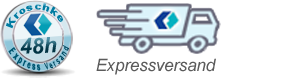
<style>
.page{position:relative;width:300px;height:80px;background:#ffffff}
.page>*{position:absolute;margin:0}
.t1{font:9px "Arial-BoldMT";letter-spacing:0.067em;color:#007ba1;scale:0.94 1}
.t2{font:21.8px "Arial-BoldItalicMT";letter-spacing:-0.013em}
.t3{font:5px "Arial-BoldMT";letter-spacing:0.347em;color:#005570;scale:0.88 1}
.t4{font:4.8px "Arial-BoldMT";letter-spacing:0.355em;color:#00475e;scale:0.88 1}
.t5{font:17.1px "Arial-ItalicMT";letter-spacing:-0.013em;color:#5b5b5b}
</style>
<div class="page">
<p class="t1" style="left:6px;top:3px;width:57px;height:26px;rotate:-7deg">Kroschke</p>
<p class="t2" style="left:20px;top:37px;width:37px;height:17px;rotate:-4deg">48h</p>
<p class="t3" style="left:8px;top:45px;width:61px;height:26px;rotate:-6deg">Express <span class="t4">Versand</span></p>
<p class="t5" style="left:96px;top:58px;width:120px;height:17px">Expressversand</p>
</div>
